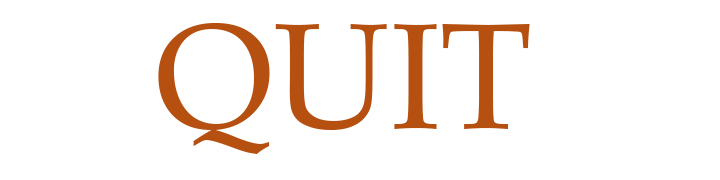
<style>
.page{position:relative;width:720px;height:180px;background:#ffffff}
.page>*{position:absolute;margin:0}
.t1{font:150px "BookAntiqua";color:#b55011}
</style>
<div class="page">
<p class="t1" style="left:158px;top:23px;width:372px;height:131px">QUIT</p>
</div>
